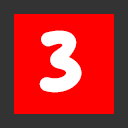
<style>
.page{position:relative;width:128px;height:128px;background:#ff0000}
.page>*{position:absolute;margin:0}
.t1{font:96.2px "Mabook";letter-spacing:0.075em;color:#ffffff}
</style>
<div class="page">
<p class="t1" style="left:39px;top:30px;width:43px;height:63px">3</p>
</div>
